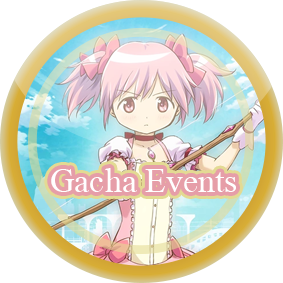
<style>
.page{position:relative;width:283px;height:283px;background:#ffffff}
.page>*{position:absolute;margin:0}
.t1{font:34px "MongolianBaiti";color:#ffffff}
</style>
<div class="page">
<p class="t1" style="left:51px;top:168px;width:185px;height:24px">Gacha Events</p>
</div>
